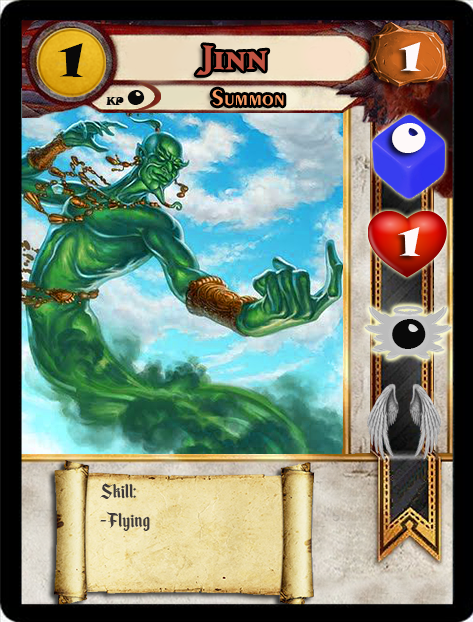
<style>
.page{position:relative;width:473px;height:622px}
.page>*{position:absolute;margin:0}
.t1{font:46.6px "SnapITC-Regular";color:#090909;scale:1.05 1}
.t2{font:40px "MatrixBoldSmallCaps";color:#c25443;scale:1.06 1}
.t3{font:40px "SnapITC-Regular";color:#fef9f9;scale:1.05 1}
.t4{font:22.7px "Exotic350BT-DemiBold";color:#f89c64;scale:1.06 1}
.t5{font:20.5px "SnapITC-Regular";color:#090909}
.t6{font:40px "SnapITC-Regular";color:#090909;scale:1.05 1}
.t7{font:24px "EnchantedLand";color:#3e3939}
</style>
<div class="page">
<p class="t1" style="left:58px;top:43px;width:25px;height:34px">1</p>
<p class="t2" style="left:196px;top:45px;width:72px;height:30px">Jinn</p>
<p class="t3" style="left:399px;top:42px;width:22px;height:29px">1</p>
<p class="t4" style="left:212px;top:89px;width:72px;height:17px">Summon</p>
<p class="t5" style="left:127px;top:90px;width:18px;height:15px">0</p>
<p class="t3" style="left:392px;top:123px;width:34px;height:30px">0</p>
<p class="t3" style="left:398px;top:227px;width:22px;height:29px">1</p>
<p class="t6" style="left:392px;top:319px;width:34px;height:30px">0</p>
<p class="t7" style="left:100px;top:483px;width:50px;height:48px">Skill:<br>- Flying</p>
</div>
